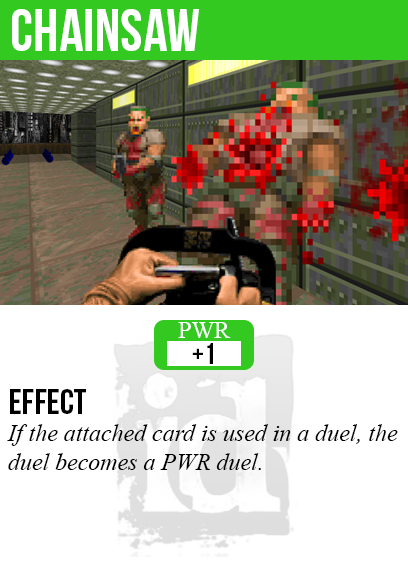
<style>
.page{position:relative;width:408px;height:585px;background:#ffffff}
.page>*{position:absolute;margin:0}
.t1{font:60px "BebasNeue";color:#ffffff}
.t2{font:24px "TimesNewRomanPSMT";color:#ffffff}
.t3{font:30px "BebasNeue";color:#000000}
.t4{font:35.9px "BebasNeue";color:#000000}
.t5{font:23.9px "TimesNewRomanPS-ItalicMT";color:#000000}
</style>
<div class="page">
<p class="t1" style="left:12px;top:9px;width:187px;height:42px">chainsaw</p>
<p class="t2" style="left:178px;top:322px;width:53px;height:16px">PWR</p>
<p class="t3" style="left:192px;top:343px;width:21px;height:21px">+1</p>
<p class="t4" style="left:10px;top:389px;width:76px;height:25px">effect</p>
<p class="t5" style="left:7px;top:424px;width:391px;height:46px">If the attached card is used in a duel, the<br>duel becomes a PWR duel.</p>
</div>
